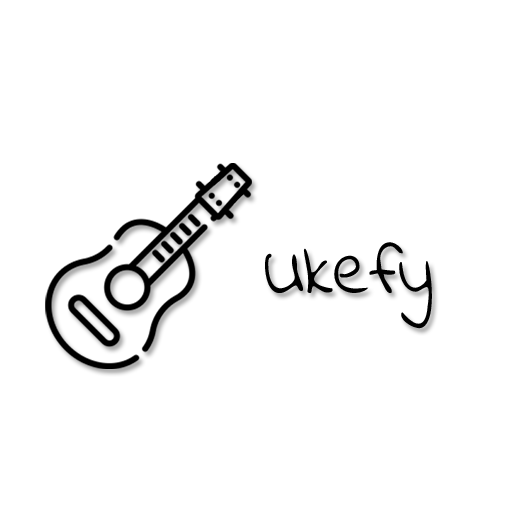
<style>
.page{position:relative;width:512px;height:512px;background:#ffffff}
.page>*{position:absolute;margin:0}
.t1{font:72px "IndieFlower";color:#000000}
</style>
<div class="page">
<p class="t1" style="left:265px;top:242px;width:167px;height:87px">Ukefy</p>
</div>
